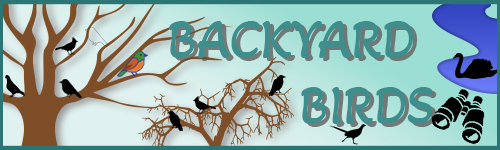
<style>
.page{position:relative;width:500px;height:150px}
.page>*{position:absolute;margin:0}
.t1{font:55.3px "AkayaKanadaka-Regular";color:#3e8e8d;text-transform:uppercase}
</style>
<div class="page">
<p class="t1" style="left:169px;top:21px;width:264px;height:103px">Backyard<br>     Birds</p>
</div>
